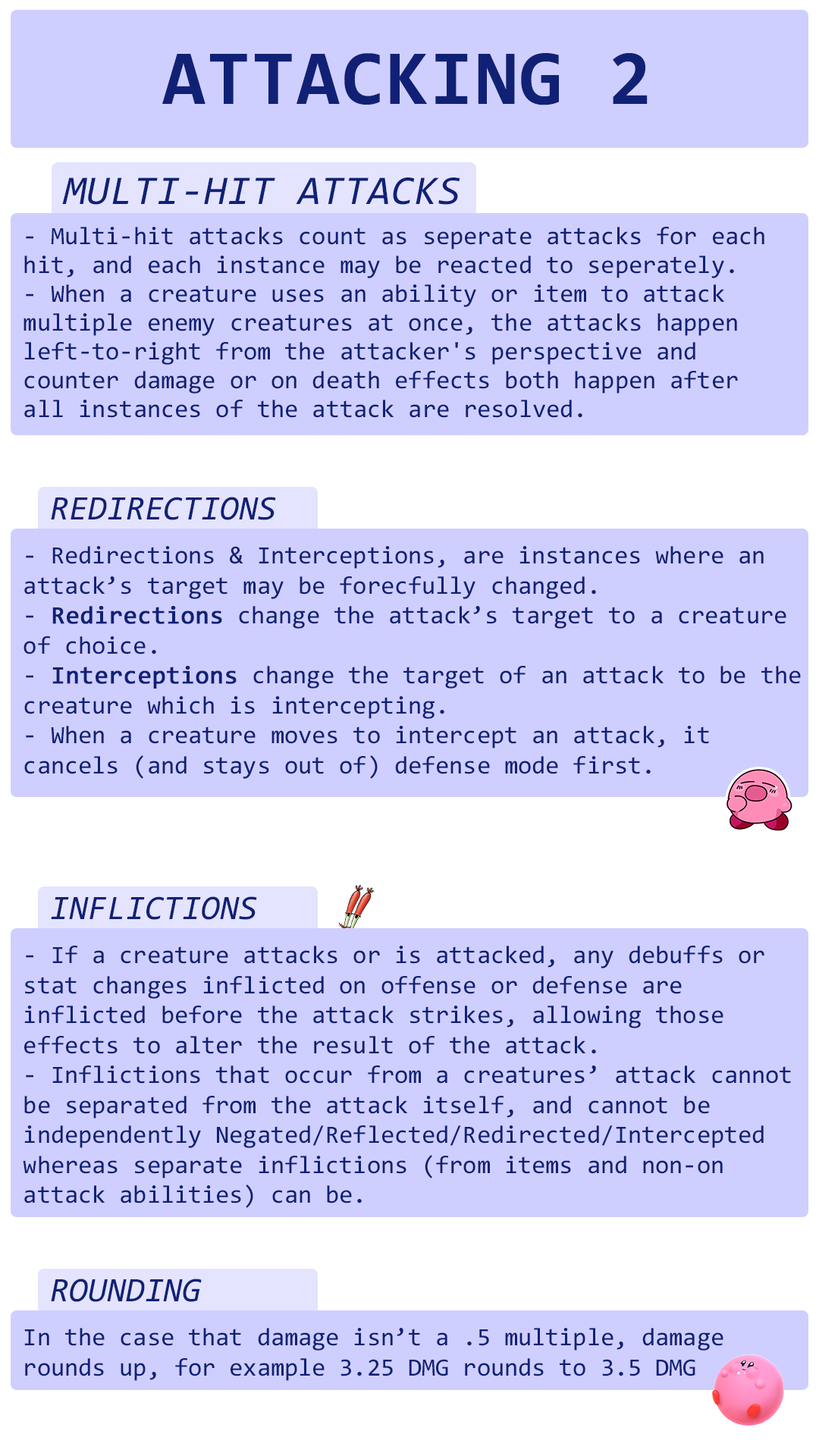
<style>
.page{position:relative;width:819px;height:1456px;background:#cfcfff}
.page>*{position:absolute;margin:0}
.t1{font:78.3px "Consolas-Bold";letter-spacing:0.02em;color:#102175}
.t2{font:41.1px "Consolas-Italic";letter-spacing:0.02em;color:#102175}
.t3{font:25px/28.8px "Consolas";color:#102175}
.t4{font:34.3px "Consolas-Italic";color:#102175}
.t5{font:25px "Consolas";color:#102175}
.t6{font:25px "Consolas";color:#102175;font-weight:bold}
</style>
<div class="page">
<p class="t1" style="left:162px;top:53px;width:486px;height:52px">ATTACKING 2</p>
<p class="t2" style="left:62px;top:177px;width:398px;height:28px">MULTI-HIT ATTACKS</p>
<p class="t3" style="left:24px;top:227px;width:740px;height:191px">- Multi-hit attacks count as seperate attacks for each hit, and each instance may be reacted to seperately.<br>- When a creature uses an ability or item to attack multiple enemy creatures at once, the attacks happen left-to-right from the attacker's perspective and counter damage or on death effects both happen after all instances of the attack are resolved.</p>
<p class="t4" style="left:51px;top:497px;width:225px;height:23px">REDIRECTIONS</p>
<p class="t5" style="left:24px;top:546px;width:777px;height:233px">- Redirections &amp; Interceptions, are instances where an attack’s target may be forecfully changed.<br>- <span class="t6">Redirections</span> change the attack’s target to a creature of choice.<br>- <span class="t6">Interceptions</span> change the target of an attack to be the creature which is intercepting.<br>- When a creature moves to intercept an attack, it cancels (and stays out of) defense mode first.</p>
<p class="t4" style="left:51px;top:896px;width:206px;height:24px">INFLICTIONS</p>
<p class="t5" style="left:23px;top:946px;width:768px;height:262px">- If a creature attacks or is attacked, any debuffs or stat changes inflicted on offense or defense are inflicted before the attack strikes, allowing those effects to alter the result of the attack. <br>- Inflictions that occur from a creatures’ attack cannot be separated from the attack itself, and cannot be independently Negated/Reflected/Redirected/Intercepted whereas separate inflictions (from items and non-on attack abilities) can be.</p>
<p class="t4" style="left:51px;top:1279px;width:151px;height:23px">ROUNDING</p>
<p class="t5" style="left:24px;top:1328px;width:699px;height:53px">In the case that damage isn’t a .5 multiple, damage rounds up, for example 3.25 DMG rounds to 3.5 DMG</p>
</div>
